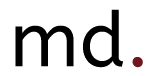
<style>
.page{position:relative;width:150px;height:76px;background:#ffffff}
.page>*{position:absolute;margin:0}
.t1{font:76.4px "ABeeZee-Regular";color:#000000}
.t2{font:76.4px "ABeeZee-Regular";color:#70161e}
</style>
<div class="page">
<p class="t1" style="left:15px;top:9px;width:128px;height:59px">md<span class="t2">.</span></p>
</div>
